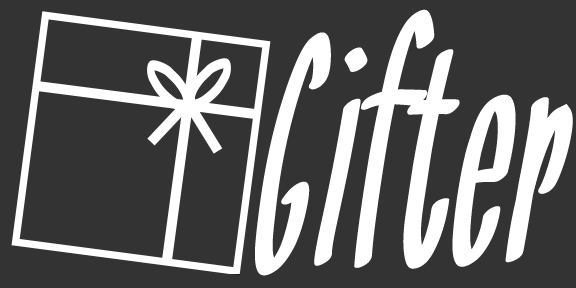
<style>
.page{position:relative;width:576px;height:288px;background:#333333}
.page>*{position:absolute;margin:0}
.t1{font:340.9px "Snickles";letter-spacing:0.055em;color:#ffffff;scale:0.47 1}
</style>
<div class="page">
<p class="t1" style="left:255px;top:9px;width:318px;height:267px;rotate:-1deg">Gifter</p>
</div>
